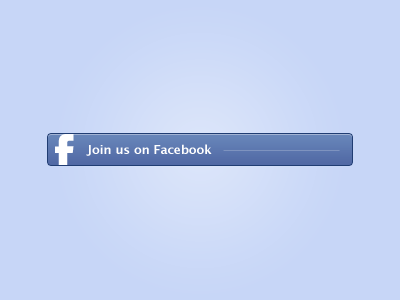
<style>
.page{position:relative;width:400px;height:300px;background:#c7d6f7}
.page>*{position:absolute;margin:0}
.t1{font:12px "LucidaGrande-Bold";color:#ffffff}
</style>
<div class="page">
<p class="t1" style="left:86px;top:144px;width:126px;height:12px">Join us on Facebook</p>
</div>
